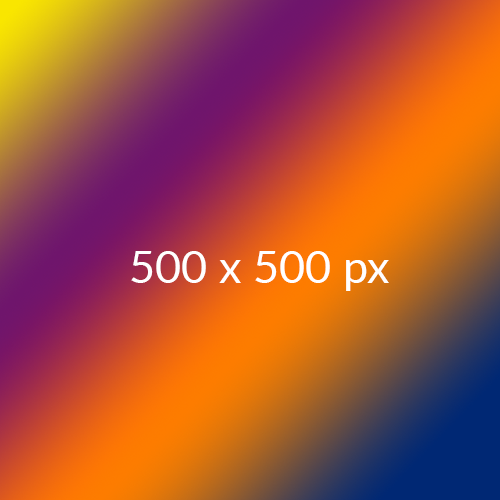
<style>
.page{position:relative;width:500px;height:500px}
.page>*{position:absolute;margin:0}
.t1{font:45px "Lato-Regular";color:#ffffff}
</style>
<div class="page">
<p class="t1" style="left:131px;top:251px;width:258px;height:40px">500 x 500 px</p>
</div>
